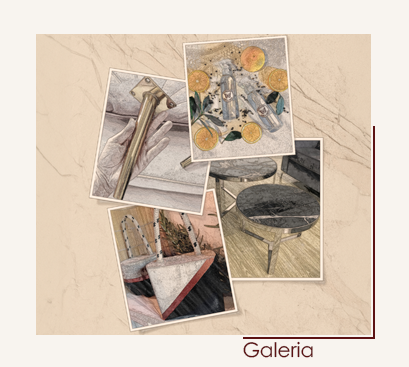
<style>
.page{position:relative;width:409px;height:367px;background:#f8f4ef}
.page>*{position:absolute;margin:0}
.t1{font:20px "CenturyGothic";color:#5c1213}
</style>
<div class="page">
<p class="t1" style="left:243px;top:341px;width:70px;height:17px">Galeria</p>
</div>
